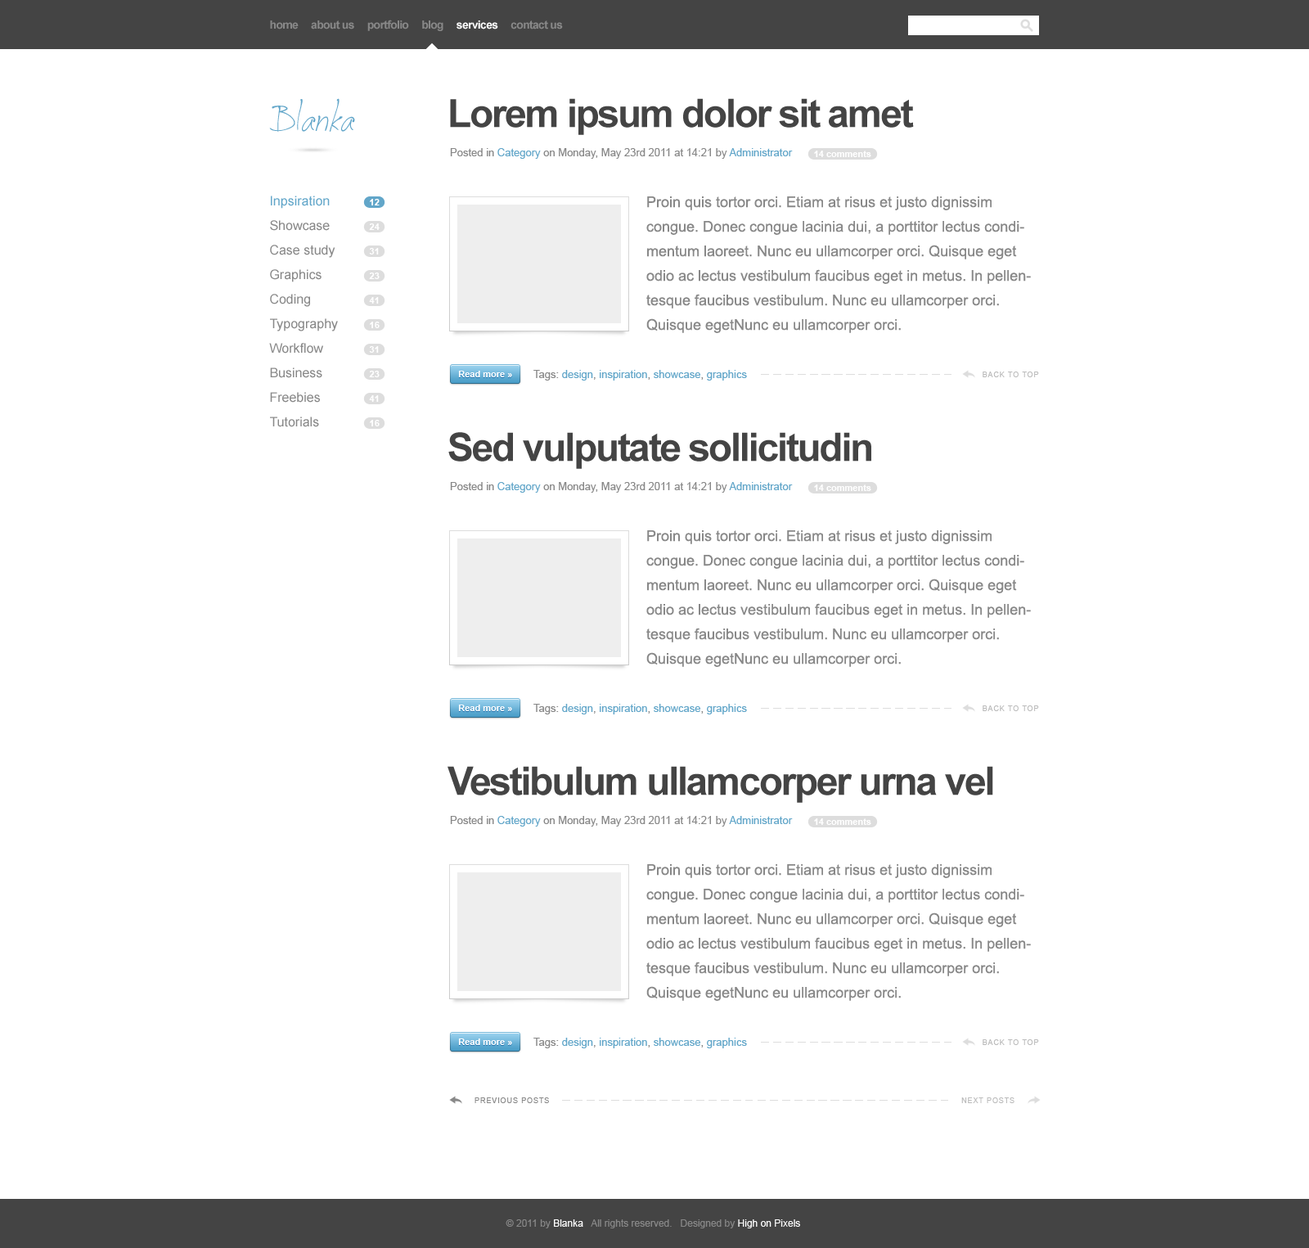
<style>
.page{position:relative;width:1309px;height:1248px;background:#ffffff}
.page>*{position:absolute;margin:0}
.t1{font:11.5px "Arial-BoldMT";letter-spacing:-0.05em;color:#888888}
.t2{font:11.5px "Arial-BoldMT";letter-spacing:-0.05em;color:#ffffff}
.t3{font:49.9px "JellykaCuttyCupcakes";color:#62a6c9}
.t4{font:39.3px "Arial-BoldMT";letter-spacing:-0.05em;color:#444444}
.t5{font:10.6px "ArialMT";color:#888888}
.t6{font:10.6px "ArialMT";color:#62a6c9}
.t7{font:9px "Arial-BoldMT";color:#ffffff}
.t8{font:13.1px/24.5px "ArialMT";color:#888888}
.t9{font:13.1px/24.5px "ArialMT";color:#62a6c9}
.t10{font:14.7px/24.5px "ArialMT";color:#888888}
.t11{font:7.4px "ArialMT";letter-spacing:0.1em;color:#bbbbbb;text-transform:uppercase}
.t12{font:7.4px "ArialMT";letter-spacing:0.1em;color:#888888;text-transform:uppercase}
.t13{font:9.8px "ArialMT";color:#888888}
.t14{font:9.8px "ArialMT";color:#ffffff}
</style>
<div class="page">
<p class="t1" style="left:270px;top:20px;width:293px;height:11px">home     about us     portfolio     blog     <span class="t2">services</span>     contact us</p>
<p class="t3" style="left:269px;top:98px;width:86px;height:35px">Blanka</p>
<p class="t4" style="left:450px;top:98px;width:464px;height:37px">Lorem ipsum dolor sit amet</p>
<p class="t5" style="left:450px;top:148px;width:343px;height:11px">Posted in <span class="t6">Category</span> on Monday, May 23rd 2011 at 14:21 by<span class="t6"> Administrator</span></p>
<p class="t7" style="left:814px;top:151px;width:57px;height:6px">14 comments</p>
<p class="t8" style="left:269px;top:196px;width:69px;height:231px"><span class="t9">Inpsiration<br></span>Showcase<br>Case study<br>Graphics<br>Coding<br>Typography<br>Workflow<br>Business<br>Freebies<br>Tutorials</p>
<p class="t10" style="left:646px;top:196px;width:385px;height:137px">Proin quis tortor orci. Etiam at risus et justo dignissim congue. Donec congue lacinia dui, a porttitor lectus condimentum laoreet. Nunc eu ullamcorper orci. Quisque eget odio ac lectus vestibulum faucibus eget in metus. In pellentesque faucibus vestibulum. Nunc eu ullamcorper orci. Quisque egetNunc eu ullamcorper orci.</p>
<p class="t7" style="left:370px;top:199px;width:10px;height:6px">12</p>
<p class="t7" style="left:369px;top:223px;width:11px;height:7px">24</p>
<p class="t7" style="left:369px;top:248px;width:10px;height:6px">31</p>
<p class="t7" style="left:369px;top:272px;width:11px;height:7px">23</p>
<p class="t7" style="left:369px;top:297px;width:10px;height:7px">41</p>
<p class="t7" style="left:370px;top:322px;width:10px;height:6px">16</p>
<p class="t7" style="left:369px;top:346px;width:10px;height:7px">31</p>
<p class="t7" style="left:369px;top:371px;width:11px;height:6px">23</p>
<p class="t7" style="left:458px;top:371px;width:54px;height:6px">Read more »</p>
<p class="t6" style="left:533px;top:370px;width:214px;height:10px"><span class="t5">Tags: </span>design<span class="t5">, </span>inspiration<span class="t5">, </span>showcase<span class="t5">, </span>graphics</p>
<p class="t11" style="left:983px;top:371px;width:56px;height:6px">back to top</p>
<p class="t7" style="left:369px;top:395px;width:10px;height:7px">41</p>
<p class="t7" style="left:370px;top:420px;width:10px;height:6px">16</p>
<p class="t4" style="left:448px;top:432px;width:423px;height:37px">Sed vulputate sollicitudin</p>
<p class="t5" style="left:450px;top:482px;width:343px;height:11px">Posted in <span class="t6">Category</span> on Monday, May 23rd 2011 at 14:21 by<span class="t6"> Administrator</span></p>
<p class="t7" style="left:814px;top:484px;width:57px;height:7px">14 comments</p>
<p class="t10" style="left:646px;top:530px;width:385px;height:137px">Proin quis tortor orci. Etiam at risus et justo dignissim congue. Donec congue lacinia dui, a porttitor lectus condimentum laoreet. Nunc eu ullamcorper orci. Quisque eget odio ac lectus vestibulum faucibus eget in metus. In pellentesque faucibus vestibulum. Nunc eu ullamcorper orci. Quisque egetNunc eu ullamcorper orci.</p>
<p class="t7" style="left:458px;top:704px;width:54px;height:7px">Read more »</p>
<p class="t6" style="left:533px;top:704px;width:214px;height:10px"><span class="t5">Tags: </span>design<span class="t5">, </span>inspiration<span class="t5">, </span>showcase<span class="t5">, </span>graphics</p>
<p class="t11" style="left:983px;top:705px;width:56px;height:6px">back to top</p>
<p class="t4" style="left:448px;top:766px;width:545px;height:37px">Vestibulum ullamcorper urna vel</p>
<p class="t5" style="left:450px;top:816px;width:343px;height:10px">Posted in <span class="t6">Category</span> on Monday, May 23rd 2011 at 14:21 by<span class="t6"> Administrator</span></p>
<p class="t7" style="left:814px;top:818px;width:57px;height:7px">14 comments</p>
<p class="t10" style="left:646px;top:864px;width:385px;height:137px">Proin quis tortor orci. Etiam at risus et justo dignissim congue. Donec congue lacinia dui, a porttitor lectus condimentum laoreet. Nunc eu ullamcorper orci. Quisque eget odio ac lectus vestibulum faucibus eget in metus. In pellentesque faucibus vestibulum. Nunc eu ullamcorper orci. Quisque egetNunc eu ullamcorper orci.</p>
<p class="t6" style="left:533px;top:1037px;width:214px;height:11px"><span class="t5">Tags: </span>design<span class="t5">, </span>inspiration<span class="t5">, </span>showcase<span class="t5">, </span>graphics</p>
<p class="t7" style="left:458px;top:1038px;width:54px;height:7px">Read more »</p>
<p class="t11" style="left:983px;top:1039px;width:56px;height:6px">back to top</p>
<p class="t12" style="left:475px;top:1097px;width:74px;height:6px">previous Posts</p>
<p class="t11" style="left:961px;top:1097px;width:54px;height:6px">next posts</p>
<p class="t13" style="left:506px;top:1219px;width:294px;height:9px">© 2011 by <span class="t14">Blanka</span>   All rights reserved.   Designed by <span class="t14">High on Pixels</span></p>
</div>
